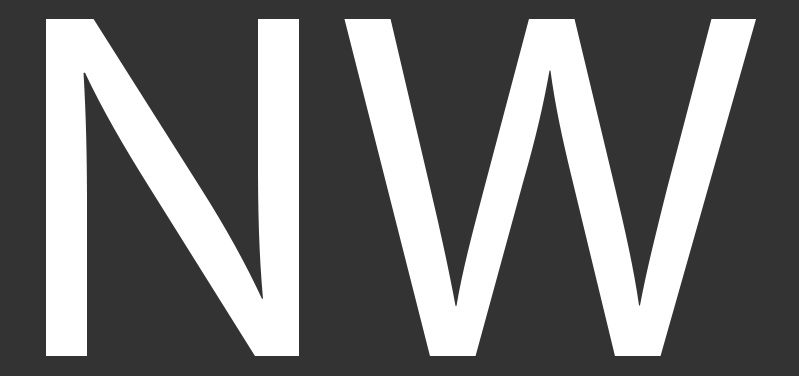
<style>
.page{position:relative;width:799px;height:376px;background:#333333}
.page>*{position:absolute;margin:0}
.t1{font:500px "MyriadPro-Regular";color:#ffffff}
</style>
<div class="page">
<p class="t1" style="left:46px;top:19px;width:710px;height:337px">NW</p>
</div>
